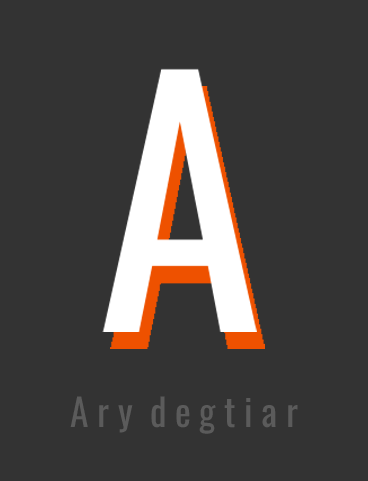
<style>
.page{position:relative;width:368px;height:481px;background:#333333}
.page>*{position:absolute;margin:0}
.t1{font:37.5px "Oswald-Regular";color:#5b5b5b}
</style>
<div class="page">
<p class="t1" style="left:70px;top:396px;width:228px;height:38px">A r y  d e g t i a r</p>
</div>
